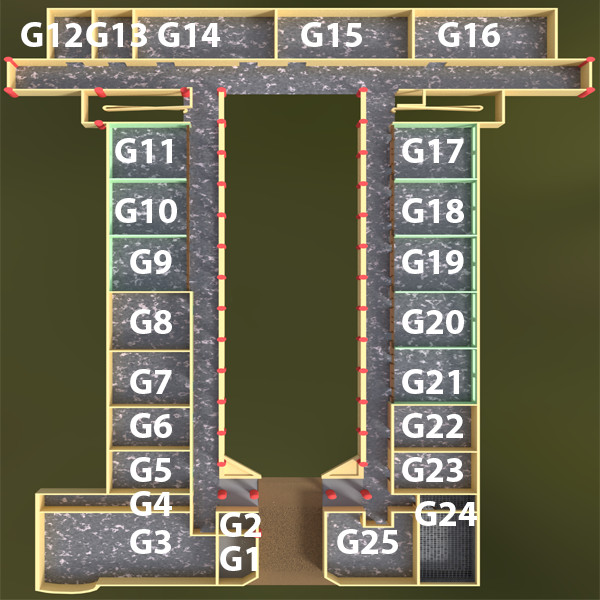
<style>
.page{position:relative;width:600px;height:600px}
.page>*{position:absolute;margin:0}
.t1{font:36px "MyriadPro-Bold";color:#ffffff}
</style>
<div class="page">
<p class="t1" style="left:21px;top:22px;width:61px;height:25px">G12</p>
<p class="t1" style="left:86px;top:22px;width:61px;height:25px">G13</p>
<p class="t1" style="left:158px;top:22px;width:62px;height:25px">G14</p>
<p class="t1" style="left:301px;top:22px;width:61px;height:25px">G15</p>
<p class="t1" style="left:438px;top:22px;width:62px;height:25px">G16</p>
<p class="t1" style="left:115px;top:138px;width:57px;height:25px">G11</p>
<p class="t1" style="left:402px;top:138px;width:62px;height:25px">G17</p>
<p class="t1" style="left:115px;top:198px;width:62px;height:25px">G10</p>
<p class="t1" style="left:402px;top:198px;width:62px;height:25px">G18</p>
<p class="t1" style="left:130px;top:249px;width:42px;height:25px">G9</p>
<p class="t1" style="left:402px;top:249px;width:62px;height:25px">G19</p>
<p class="t1" style="left:130px;top:309px;width:42px;height:25px">G8</p>
<p class="t1" style="left:402px;top:309px;width:62px;height:25px">G20</p>
<p class="t1" style="left:130px;top:369px;width:42px;height:25px">G7</p>
<p class="t1" style="left:402px;top:369px;width:57px;height:25px">G21`</p>
<p class="t1" style="left:130px;top:413px;width:42px;height:25px">G6</p>
<p class="t1" style="left:402px;top:413px;width:61px;height:25px">G22</p>
<p class="t1" style="left:130px;top:457px;width:41px;height:25px">G5</p>
<p class="t1" style="left:402px;top:457px;width:61px;height:25px">G23</p>
<p class="t1" style="left:130px;top:491px;width:42px;height:25px">G4</p>
<p class="t1" style="left:415px;top:501px;width:62px;height:25px">G24</p>
<p class="t1" style="left:220px;top:512px;width:41px;height:25px">G2</p>
<p class="t1" style="left:130px;top:529px;width:41px;height:25px">G3</p>
<p class="t1" style="left:337px;top:529px;width:61px;height:25px">G25</p>
<p class="t1" style="left:220px;top:546px;width:37px;height:25px">G1</p>
</div>
